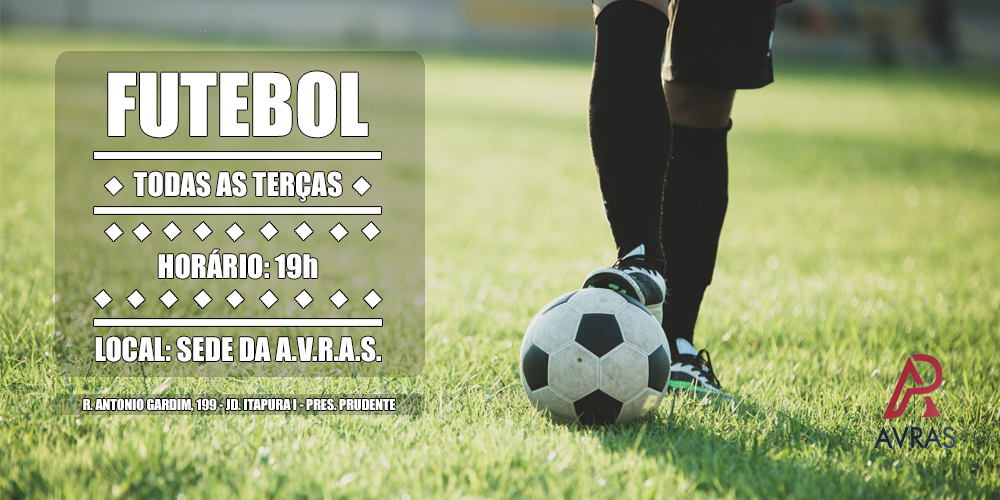
<style>
.page{position:relative;width:1000px;height:500px}
.page>*{position:absolute;margin:0}
.t1{font:80px "Impact";color:#ffffff}
.t2{font:30px "Impact";color:#ffffff}
.t3{font:14px "Impact";color:#ffffff}
</style>
<div class="page">
<p class="t1" style="left:108px;top:71px;width:260px;height:67px">FUTEBOL</p>
<p class="t2" style="left:133px;top:171px;width:209px;height:31px">TODAS AS TERÇAS</p>
<p class="t2" style="left:158px;top:249px;width:160px;height:30px">HORÁRIO: 19h</p>
<p class="t2" style="left:95px;top:336px;width:286px;height:26px">LOCAL: SEDE DA A.V.R.A.S.</p>
<p class="t3" style="left:83px;top:398px;width:313px;height:14px">R. ANTONIO GARDIM, 199 - JD. ITAPURA I - PRES. PRUDENTE</p>
</div>
